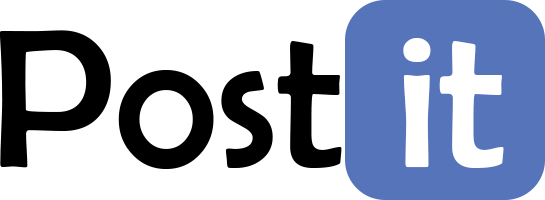
<style>
.page{position:relative;width:545px;height:200px;background:#ffffff}
.page>*{position:absolute;margin:0}
.t1{font:200px "BerlinSansFB-Reg";color:#000000}
.t2{font:200px "BerlinSansFB-Reg";color:#ffffff}
</style>
<div class="page">
<p class="t1" style="left:0px;top:30px;width:504px;height:139px">Post <span class="t2">it</span></p>
</div>
